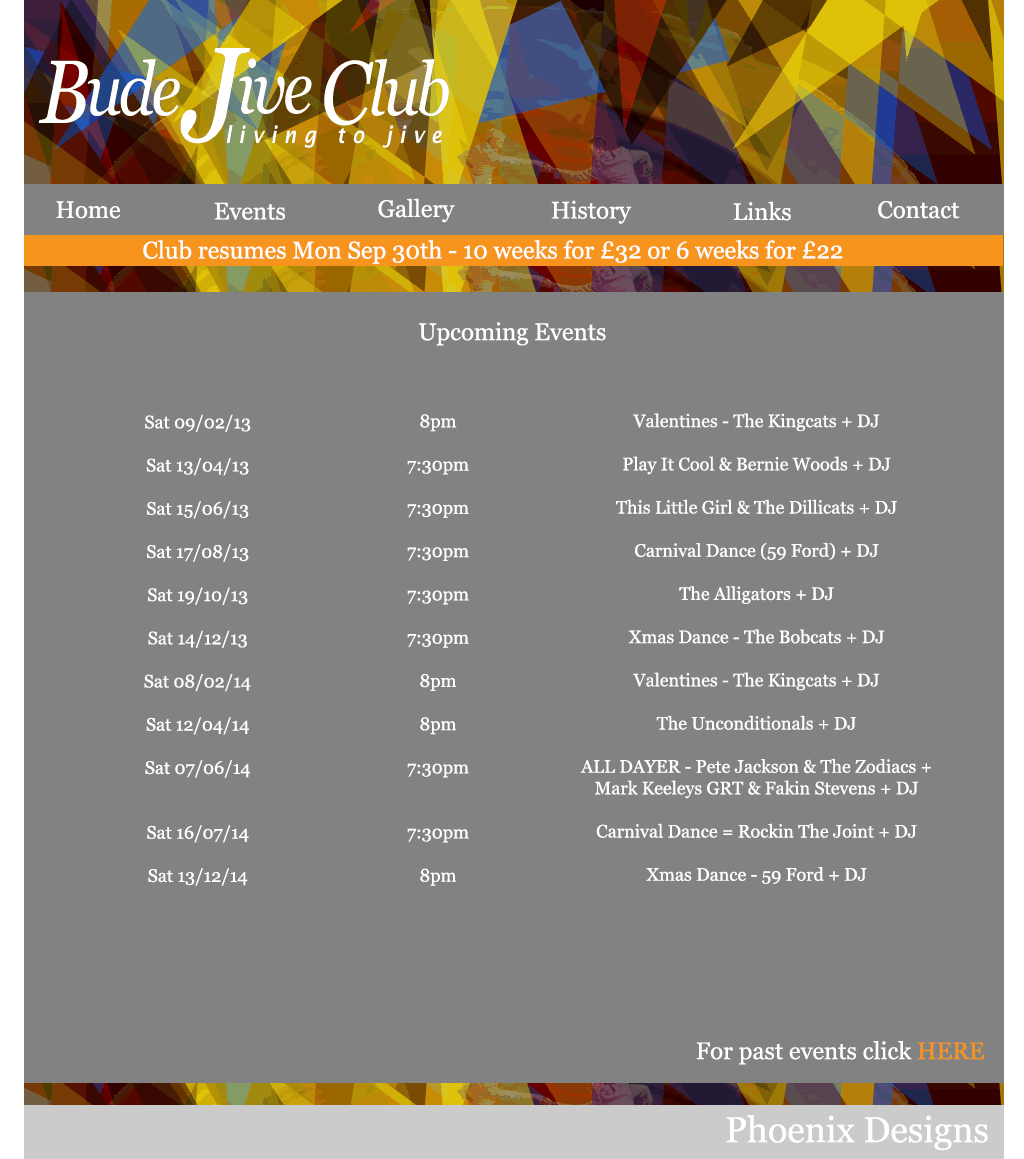
<style>
.page{position:relative;width:1024px;height:1159px;background:#828282}
.page>*{position:absolute;margin:0}
.t1{font:24px "Georgia";color:#ffffff}
.t2{font:18px "Georgia";color:#ffffff}
.t3{font:24px "Georgia";color:#f7941d}
.t4{font:36px "Georgia";color:#ffffff}
</style>
<div class="page">
<p class="t1" style="left:378px;top:198px;width:77px;height:25px">Gallery</p>
<p class="t1" style="left:56px;top:201px;width:65px;height:18px">Home</p>
<p class="t1" style="left:214px;top:202px;width:71px;height:18px">Events</p>
<p class="t1" style="left:551px;top:200px;width:81px;height:24px">History</p>
<p class="t1" style="left:733px;top:201px;width:58px;height:20px">Links</p>
<p class="t1" style="left:878px;top:201px;width:82px;height:18px">Contact</p>
<p class="t1" style="left:143px;top:240px;width:700px;height:24px">Club resumes Mon Sep 30th - 10 weeks for £32 or 6 weeks for £22</p>
<p class="t1" style="left:419px;top:322px;width:187px;height:24px">Upcoming Events</p>
<p class="t2" style="left:144px;top:414px;width:107px;height:472px;text-align:center">Sat 09/02/13<br><br>Sat 13/04/13<br> <br>Sat 15/06/13<br><br>Sat 17/08/13<br><br>Sat 19/10/13<br><br>Sat 14/12/13<br><br>Sat 08/02/14 <br><br>Sat 12/04/14<br><br>Sat 07/06/14<br><br><br>Sat 16/07/14<br><br>Sat 13/12/14</p>
<p class="t2" style="left:407px;top:414px;width:62px;height:472px;text-align:center">8pm<br><br>7:30pm<br><br>7:30pm<br><br>7:30pm<br><br>7:30pm<br><br>7:30pm<br><br>8pm<br><br>8pm<br><br>7:30pm<br><br><br>7:30pm<br><br>8pm</p>
<p class="t2" style="left:580px;top:413px;width:351px;height:471px;text-align:center">Valentines - The Kingcats + DJ<br><br>Play It Cool &amp; Bernie Woods + DJ<br><br>This Little Girl &amp; The Dillicats + DJ<br><br>Carnival Dance (59 Ford) + DJ<br><br>The Alligators + DJ<br><br>Xmas Dance - The Bobcats + DJ<br><br>Valentines - The Kingcats + DJ<br><br>The Unconditionals + DJ<br><br>ALL DAYER - Pete Jackson &amp; The Zodiacs +<br>Mark Keeleys GRT &amp; Fakin Stevens + DJ<br><br>Carnival Dance = Rockin The Joint + DJ<br><br>Xmas Dance - 59 Ford + DJ</p>
<p class="t1" style="left:696px;top:1040px;width:289px;height:25px">For past events click <span class="t3">HERE</span></p>
<p class="t4" style="left:726px;top:1115px;width:262px;height:36px">Phoenix Designs</p>
</div>
